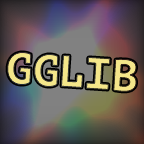
<style>
.page{position:relative;width:144px;height:144px}
.page>*{position:absolute;margin:0}
.t1{font:44px "PTMono-Bold";color:#f4e68a}
</style>
<div class="page">
<p class="t1" style="left:7px;top:52px;width:129px;height:40px;rotate:4deg">GGLIB</p>
</div>
